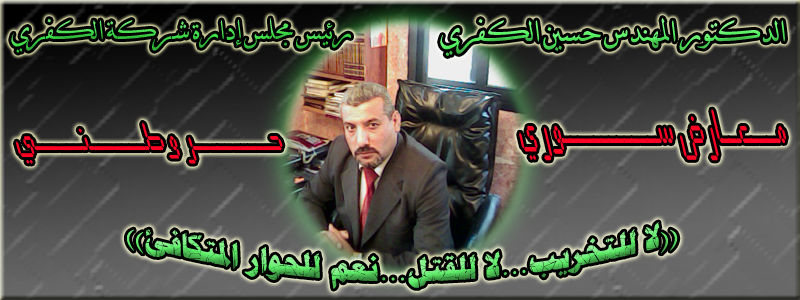
<style>
.page{position:relative;width:800px;height:300px}
.page>*{position:absolute;margin:0}
.t1{font:33.3px "DecoTypeNaskhVariants";color:#3bdd46}
.t2{font:36.1px "DecoTypeNaskhVariants"}
.t3{font:39.1px "LedItalicFont";color:#ff0024;scale:0.5 1}
.t4{font:31.5px "LedItalicFont";color:#ff0024;scale:0.62 1}
.t5{font:33.3px "PTBoldBroken"}
</style>
<div class="page">
<p class="t1" style="left:11px;top:18px;width:340px;height:35px">رئيس مجلس إدارة شركة الكفري</p>
<p class="t2" style="left:440px;top:18px;width:345px;height:38px">الدكتور المهندس حسين الكفري</p>
<p class="t3" style="left:519px;top:109px;width:267px;height:52px">مـــعــارض ســــــــــــوري</p>
<p class="t4" style="left:15px;top:122px;width:268px;height:42px">حــــــــــر وطـــــــنــــــي</p>
<p class="t5" style="left:127px;top:222px;width:551px;height:67px;text-align:center">((لا للتخريب...لا للقتل...نعم للحوار المتكافئ))</p>
</div>
